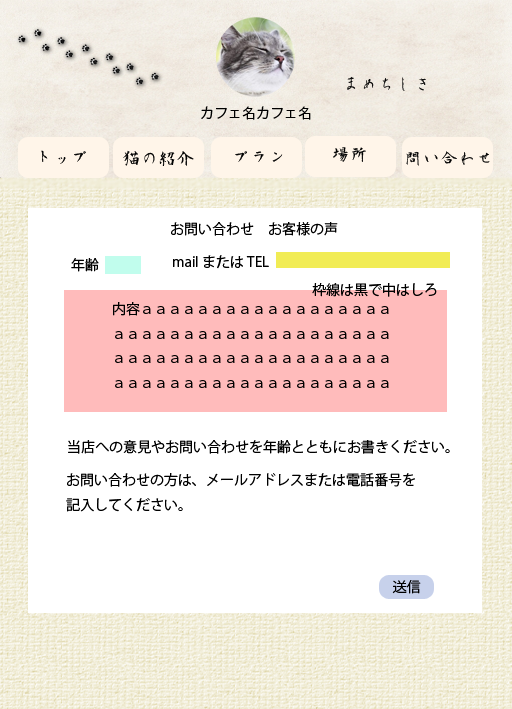
<style>
.page{position:relative;width:512px;height:709px;background:#ffffff}
.page>*{position:absolute;margin:0}
.t1{font:18px "AoyagiKouzanFontT";color:#000000}
.t2{font:14px "KozGoPr6N-Regular";color:#000000}
</style>
<div class="page">
<p class="t1" style="left:347px;top:76px;width:79px;height:15px">まめちしき</p>
<p class="t2" style="left:201px;top:106px;width:110px;height:14px">カフェ名カフェ名</p>
<p class="t1" style="left:41px;top:150px;width:45px;height:14px">トップ</p>
<p class="t1" style="left:123px;top:150px;width:71px;height:16px">猫の紹介</p>
<p class="t1" style="left:333px;top:147px;width:33px;height:15px">場所</p>
<p class="t1" style="left:235px;top:151px;width:48px;height:11px">プラン</p>
<p class="t1" style="left:406px;top:151px;width:84px;height:15px">問い合わせ</p>
<p class="t2" style="left:171px;top:222px;width:167px;height:14px">お問い合わせ　お客様の声</p>
<p class="t2" style="left:173px;top:255px;width:96px;height:14px">mail または TEL</p>
<p class="t2" style="left:71px;top:258px;width:28px;height:14px">年齢</p>
<p class="t2" style="left:312px;top:283px;width:125px;height:14px">枠線は黒で中はしろ</p>
<p class="t2" style="left:113px;top:302px;width:276px;height:86px">内容ａａａａａａａａａａａａａａａａａａ<br>ａａａａａａａａａａａａａａａａａａａａ<br>ａａａａａａａａａａａａａａａａａａａａ<br>ａａａａａａａａａａａａａａａａａａａａ</p>
<p class="t2" style="left:68px;top:440px;width:382px;height:14px">当店への意見やお問い合わせを年齢とともにお書きください。</p>
<p class="t2" style="left:66px;top:473px;width:349px;height:39px">お問い合わせの方は、メールアドレスまたは電話番号を<br>記入してください。</p>
<p class="t2" style="left:392px;top:580px;width:29px;height:14px">送信</p>
</div>
